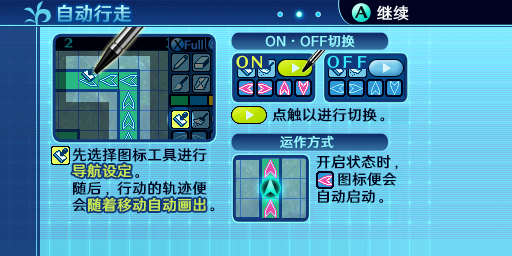
<style>
.page{position:relative;width:512px;height:256px}
.page>*{position:absolute;margin:0}
.t1{font:18.7px "HYWenHei-FEW";letter-spacing:0.025em}
.t2{font:13.3px "HYWenHei-FEW";letter-spacing:0.025em;color:#94f7ff}
.t3{font:14.7px "HYWenHei-FEW";letter-spacing:0.025em;color:#000421}
.t4{font:14.7px/16.7px "HYWenHei-FEW";letter-spacing:0.025em}
.t5{font:14.7px/17.3px "HYWenHei-FEW";letter-spacing:0.025em;color:#000421}
.t6{font:14.7px/18.7px "HYWenHei-FEW";letter-spacing:0.025em;color:#000421}
.t7{font:14.7px "HYWenHei-FEW";letter-spacing:0.025em;color:#c6e752}
</style>
<div class="page">
<p class="t1" style="left:58px;top:5px;width:73px;height:18px">自动行走</p>
<p class="t2" style="left:265px;top:35px;width:90px;height:13px">ON·OFF切换</p>
<p class="t3" style="left:272px;top:108px;width:113px;height:14px">点触以进行切换。</p>
<p class="t2" style="left:280px;top:135px;width:54px;height:14px">运作方式</p>
<p class="t4" style="left:72px;top:148px;width:143px;height:64px">先选择图标工具进行<br>导航设定。<br>随后，行动的轨迹便<br>会随着移动自动画出。</p>
<p class="t5" style="left:316px;top:154px;width:82px;height:50px">开启状态时，<br>    图标便会<br><span class="t6">自动启动。</span></p>
<p class="t7" style="left:72px;top:164px;width:60px;height:14px">导航设定</p>
<p class="t7" style="left:88px;top:197px;width:118px;height:15px">随着移动自动画出</p>
</div>
